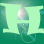
<style>
.page{position:relative;width:44px;height:44px;background:#adf9bc}
.page>*{position:absolute;margin:0}
.t1{font:36.7px "Ravie";color:#adf9bc;scale:1.34 1}
</style>
<div class="page">
<p class="t1" style="left:0px;top:3px;width:45px;height:32px;rotate:2deg">H</p>
</div>
